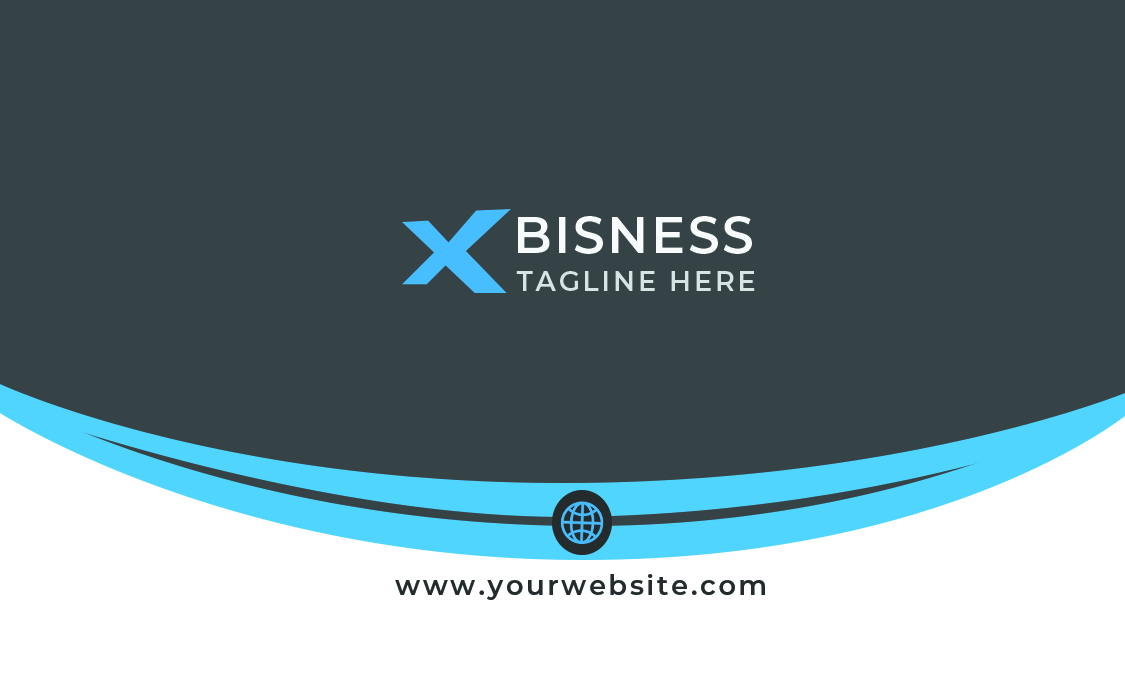
<style>
.page{position:relative;width:1125px;height:675px;background:#354346}
.page>*{position:absolute;margin:0}
.t1{font:50.9px "Montserrat-SemiBold";letter-spacing:0.05em;color:#f7fbfc}
.t2{font:27.3px "Montserrat-SemiBold";letter-spacing:0.1em;color:#d7e4e4}
.t3{font:27.1px "Montserrat-SemiBold";letter-spacing:0.1em;color:#242b2c}
</style>
<div class="page">
<p class="t1" style="left:518px;top:216px;width:234px;height:38px">BISNESS</p>
<p class="t2" style="left:516px;top:271px;width:239px;height:20px">TAGLINE HERE</p>
<p class="t3" style="left:395px;top:574px;width:370px;height:26px">www.yourwebsite.com</p>
</div>
